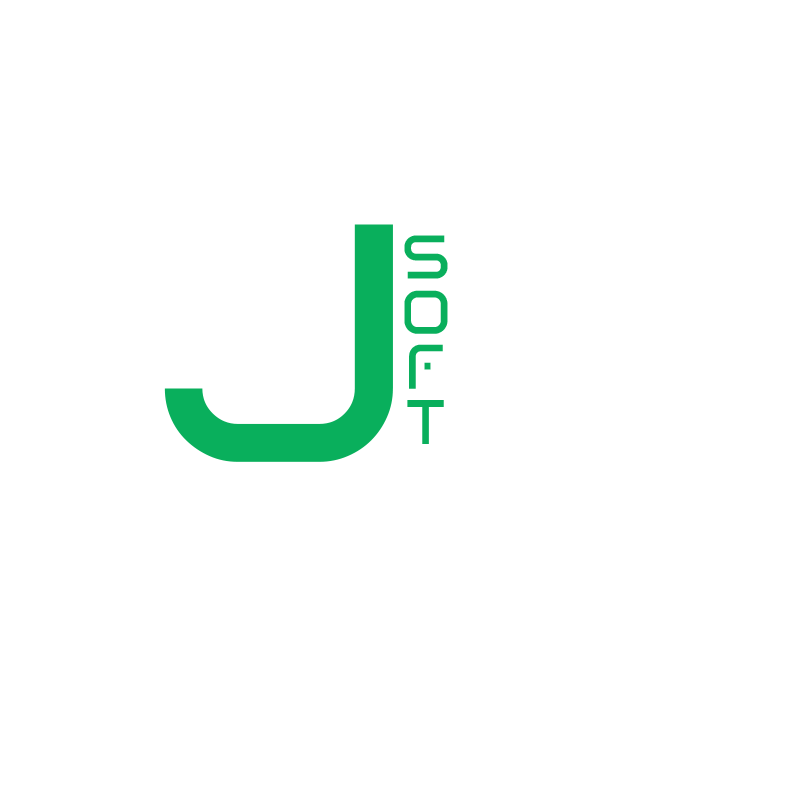
<style>
.page{position:relative;width:800px;height:800px;background:#ffffff}
.page>*{position:absolute;margin:0}
.t1{font:403.6px "01Digitall";color:#09af5c}
.t2{font:72px/55px "01Digitall";color:#09af5c}
</style>
<div class="page">
<p class="t1" style="left:164px;top:224px;width:229px;height:238px">J</p>
<p class="t2" style="left:404px;top:235px;width:44px;height:209px;text-align:center">S<br>O<br>F<br>T</p>
</div>
